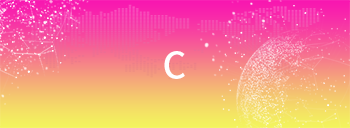
<style>
.page{position:relative;width:350px;height:128px}
.page>*{position:absolute;margin:0}
.t1{font:47.2px "SourceHanSansCN-Regular";letter-spacing:0.05em;color:#ffffff}
</style>
<div class="page">
<p class="t1" style="left:164px;top:51px;width:21px;height:28px">c</p>
</div>
